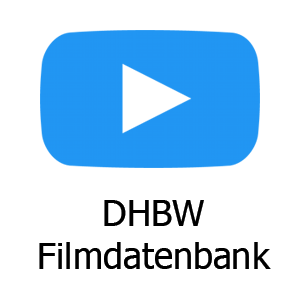
<style>
.page{position:relative;width:300px;height:300px;background:#ffffff}
.page>*{position:absolute;margin:0}
.t1{font:36px "Tahoma";color:#ffffff}
</style>
<div class="page">
<p class="t1" style="left:39px;top:200px;width:232px;height:69px;text-align:center">DHBW <br>Filmdatenbank</p>
</div>
